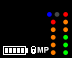
<style>
.page{position:relative;width:72px;height:58px;background:#000000}
.page>*{position:absolute;margin:0}
.t1{font:8px "Arial-BoldMT";letter-spacing:0.025em;color:#ffffff;scale:0.94 1}
</style>
<div class="page">
<p class="t1" style="left:37px;top:47px;width:12px;height:6px">MP</p>
</div>
